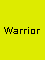
<style>
.page{position:relative;width:45px;height:60px;background:#ddeb00}
.page>*{position:absolute;margin:0}
.t1{font:10px "OpenSans-Regular";color:#000000}
</style>
<div class="page">
<p class="t1" style="left:4px;top:27px;width:36px;height:7px">Warrior</p>
</div>
